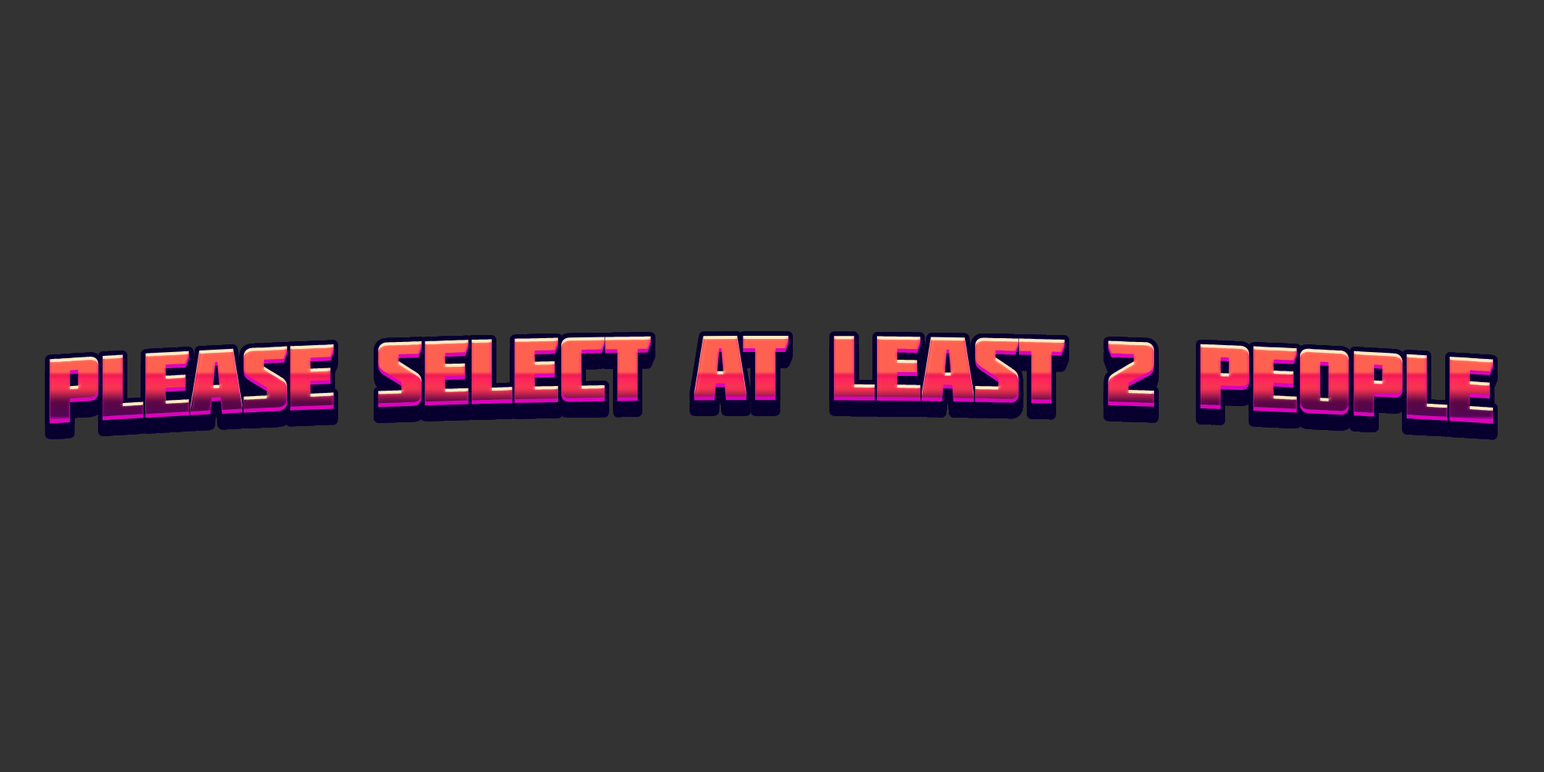
<style>
.page{position:relative;width:1544px;height:772px;background:#333333}
.page>*{position:absolute;margin:0}
.t1{font:91.9px "Molot";letter-spacing:-0.025em}
</style>
<div class="page">
<p class="t1" style="left:49px;top:335px;width:1445px;height:89px">Please select at least 2 people</p>
</div>
